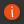
<style>
.page{position:relative;width:24px;height:24px;background:#333333}
.page>*{position:absolute;margin:0}
.t1{font:24px "JennaSue";letter-spacing:0.04em;color:#ffffff}
</style>
<div class="page">
<p class="t1" style="left:11px;top:6px;width:3px;height:12px">i</p>
</div>
